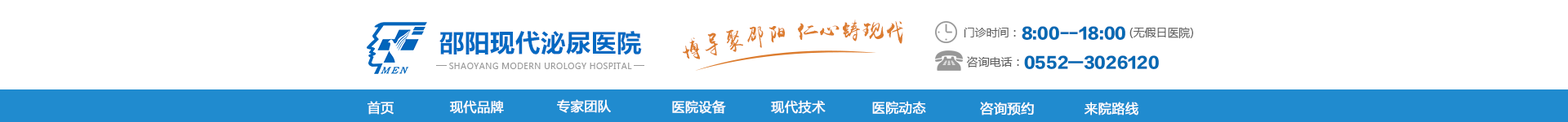
<style>
.page{position:relative;width:1568px;height:122px;background:#ffffff}
.page>*{position:absolute;margin:0}
.t1{font:21.9px "yuweij";letter-spacing:0.02em;color:#dc7c2e;text-transform:uppercase}
.t2{font:11.1px "MicrosoftYaHei";letter-spacing:0.02em;color:#616161;text-transform:uppercase}
.t3{font:14.9px "FZLTHH_SC--GB1-4";letter-spacing:0.02em;color:#0369b3;text-transform:uppercase}
.t4{font:24.4px "MicrosoftYaHei-Bold";letter-spacing:0.02em;color:#0269c2;text-transform:uppercase}
.t5{font:8.5px "MicrosoftYaHei";letter-spacing:0.02em;color:#999999;text-transform:uppercase}
.t6{font:13px "MicrosoftYaHei";letter-spacing:0.02em;color:#ffffff;text-transform:uppercase;font-weight:bold}
</style>
<div class="page">
<p class="t1" style="left:683px;top:20px;width:220px;height:40px;rotate:-1deg">博导聚邵阳 仁心铸现代</p>
<p class="t2" style="left:964px;top:28px;width:52px;height:10px">门诊时间：</p>
<p class="t3" style="left:1022px;top:26px;width:103px;height:14px">8:00--18:00</p>
<p class="t2" style="left:1129px;top:27px;width:64px;height:12px">(无假日医院)</p>
<p class="t4" style="left:439px;top:31px;width:203px;height:25px">邵阳现代泌尿医院</p>
<p class="t5" style="left:449px;top:63px;width:183px;height:6px">Shaoyang modern urology hospital</p>
<p class="t2" style="left:966px;top:56px;width:53px;height:12px">咨询电话：</p>
<p class="t3" style="left:1024px;top:56px;width:135px;height:13px">0552—3026120</p>
<p class="t6" style="left:368px;top:101px;width:26px;height:14px">首页</p>
<p class="t6" style="left:450px;top:100px;width:54px;height:14px">现代品牌</p>
<p class="t6" style="left:557px;top:100px;width:54px;height:14px">专家团队</p>
<p class="t6" style="left:672px;top:100px;width:54px;height:14px">医院设备</p>
<p class="t6" style="left:771px;top:100px;width:55px;height:14px">现代技术</p>
<p class="t6" style="left:872px;top:101px;width:54px;height:14px">医院动态</p>
<p class="t6" style="left:980px;top:102px;width:54px;height:14px">咨询预约</p>
<p class="t6" style="left:1085px;top:102px;width:53px;height:14px">来院路线</p>
</div>
